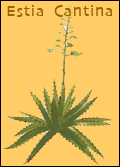
<style>
.page{position:relative;width:120px;height:167px;background:#ffcc66}
.page>*{position:absolute;margin:0}
.t1{font:16px "Skia";letter-spacing:0.05em;color:#996600}
</style>
<div class="page">
<p class="t1" style="left:6px;top:3px;width:108px;height:19px">Estia Cantina</p>
</div>
